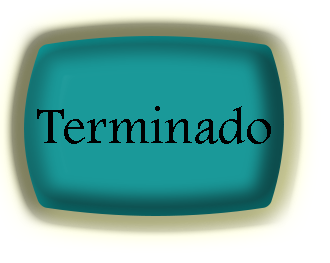
<style>
.page{position:relative;width:330px;height:263px;background:#1a9999}
.page>*{position:absolute;margin:0}
.t1{font:52.9px "FootlightMTLight";color:#000000}
</style>
<div class="page">
<p class="t1" style="left:37px;top:106px;width:234px;height:38px">Terminado</p>
</div>
